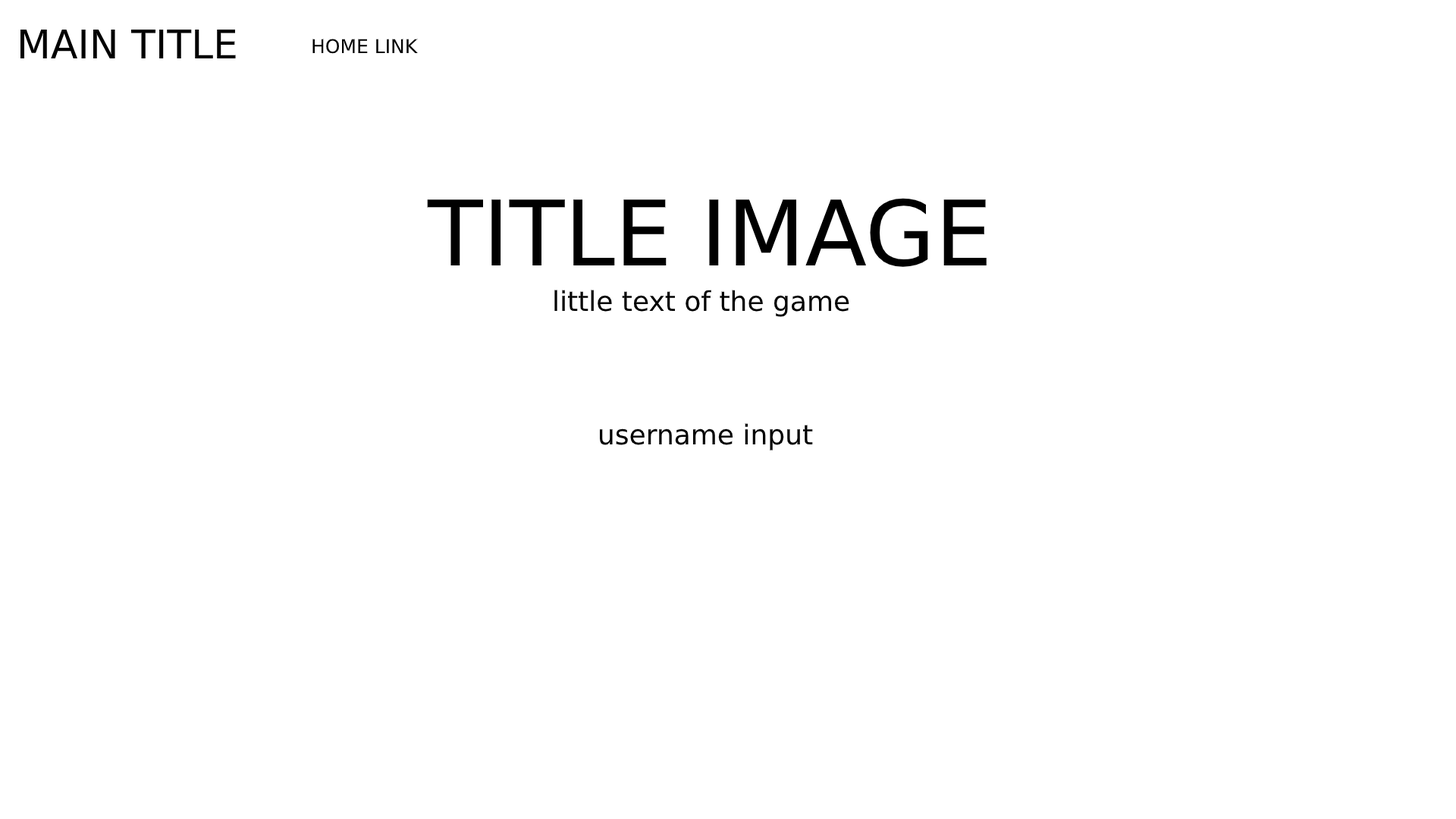
<style>
.page{position:relative;width:1456px;height:819px;background:#ffffff}
.page>*{position:absolute;margin:0}
.t1{font:39.4px "DejaVuSans";color:#000000}
.t2{font:19px "DejaVuSans";color:#000000}
.t3{font:90.2px "DejaVuSans";color:#000000}
.t4{font:27.3px "DejaVuSans";color:#000000}
</style>
<div class="page">
<p class="t1" style="left:20px;top:30px;width:216px;height:28px">MAIN TITLE</p>
<p class="t2" style="left:312px;top:39px;width:106px;height:15px">HOME LINK</p>
<p class="t3" style="left:427px;top:198px;width:560px;height:69px">TITLE IMAGE</p>
<p class="t4" style="left:554px;top:290px;width:295px;height:27px">little text of the game</p>
<p class="t4" style="left:600px;top:423px;width:213px;height:27px">username input</p>
</div>
